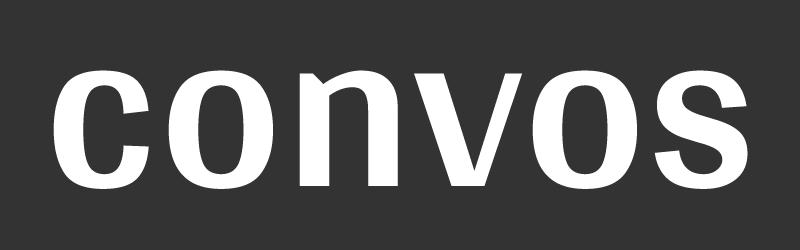
<style>
.page{position:relative;width:800px;height:250px;background:#333333}
.page>*{position:absolute;margin:0}
.t1{font:234.4px "Arya-Bold";color:#ffffff}
</style>
<div class="page">
<p class="t1" style="left:53px;top:70px;width:695px;height:119px">convos</p>
</div>
